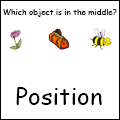
<style>
.page{position:relative;width:120px;height:120px;background:#ffffff}
.page>*{position:absolute;margin:0}
.t1{font:8px "ComicSansMS";color:#000000}
.t2{font:24px "ComicSansMS";color:#000000}
</style>
<div class="page">
<p class="t1" style="left:3px;top:9px;width:114px;height:8px">Which object is in the middle?</p>
<p class="t2" style="left:16px;top:87px;width:86px;height:18px">Position</p>
</div>
